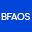
<style>
.page{position:relative;width:32px;height:32px;background:#0045da}
.page>*{position:absolute;margin:0}
.t1{font:8.3px "Comfortaa-Bold";color:#ffffff}
</style>
<div class="page">
<p class="t1" style="left:1px;top:13px;width:29px;height:7px">BFAOS</p>
</div>
